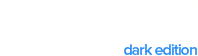
<style>
.page{position:relative;width:198px;height:56px;background:#ffffff}
.page>*{position:absolute;margin:0}
.t1{font:16px "ProximaNova-Semibold";letter-spacing:-0.06em;color:#298ef6}
</style>
<div class="page">
<p class="t1" style="left:124px;top:44px;width:73px;height:11px">dark edition</p>
</div>
